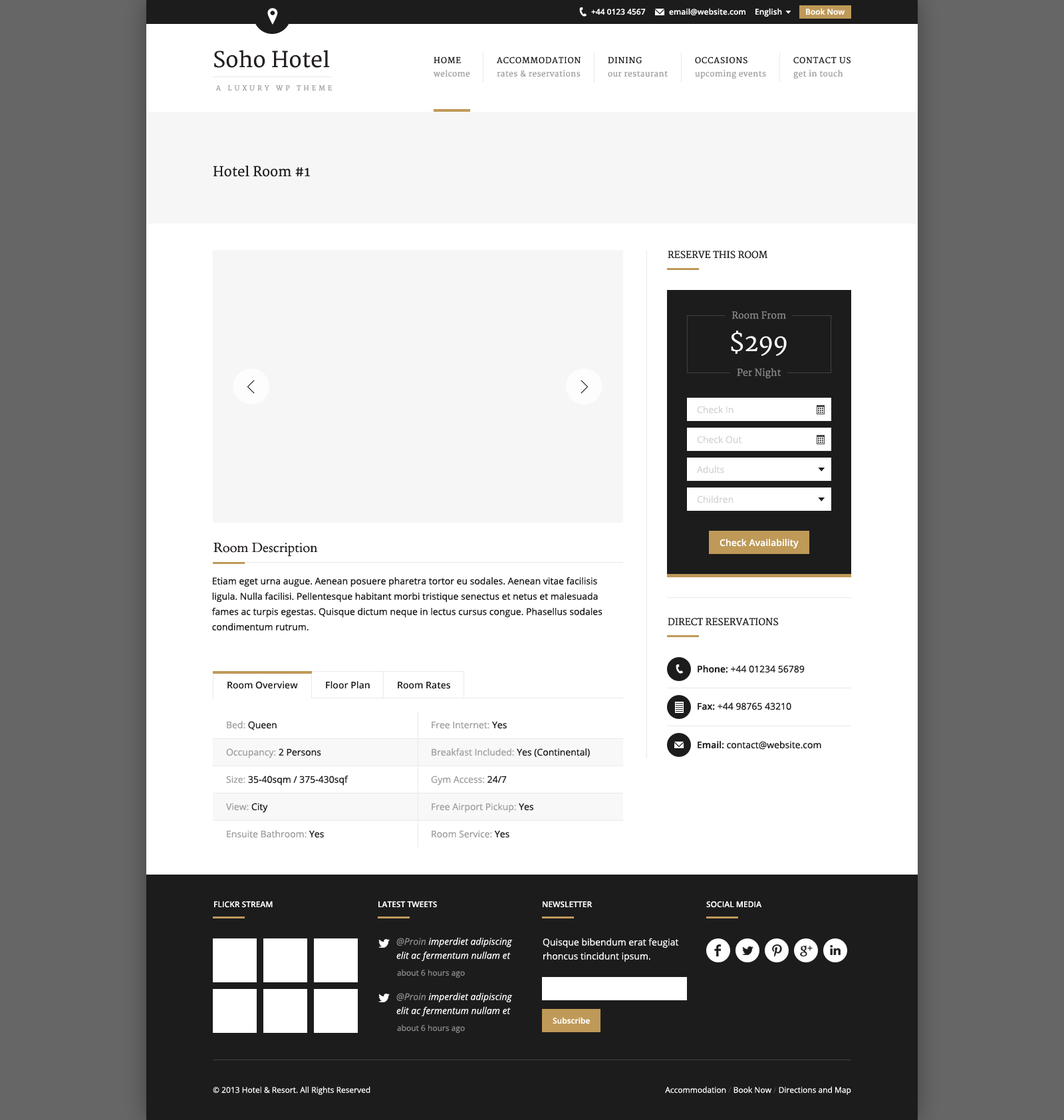
<style>
.page{position:relative;width:1064px;height:1120px;background:#ffffff}
.page>*{position:absolute;margin:0}
.t1{font:8px "OpenSans-Semibold";color:#ffffff}
.t2{font:21.3px "Merriweather";color:#231f20}
.t3{font:8px "Merriweather";letter-spacing:0.075em;color:#1c1c1c;text-transform:uppercase}
.t4{font:8px "Merriweather";letter-spacing:0.025em;color:#a09d9d}
.t5{font:6.7px "Merriweather";letter-spacing:0.4em;color:#a09d9d;text-transform:uppercase}
.t6{font:13.3px "Merriweather";color:#1c1c1c}
.t7{font:9.3px "Merriweather";color:#231f20;text-transform:uppercase}
.t8{font:9.3px "Merriweather";color:#8b8b8b}
.t9{font:23.9px "Merriweather";color:#ffffff}
.t10{font:9.3px "OpenSans";color:#d3d3d3}
.t11{font:13.3px "Cardo-Regular";color:#231f20}
.t12{font:9.3px "OpenSans-Semibold";color:#ffffff}
.t13{font:9.3px/15.3px "OpenSans";color:#1c1c1c}
.t14{font:9.3px "OpenSans";color:#1c1c1c}
.t15{font:9.3px "OpenSans-Semibold";color:#1c1c1c}
.t16{font:9.3px "OpenSans";color:#a09d9d}
.t17{font:8px "OpenSans-Semibold";color:#ffffff;text-transform:uppercase}
.t18{font:9.3px/14px "OpenSans-Italic";color:#ffffff}
.t19{font:9.3px/14px "OpenSans-Italic";color:#8b8b8b}
.t20{font:9.3px/14px "OpenSans";color:#ffffff}
.t21{font:8px "OpenSans";color:#8b8b8b}
.t22{font:8px "OpenSans";color:#ffffff}
.t23{font:8px "OpenSans";color:#424242}
</style>
<div class="page">
<p class="t1" style="left:591px;top:9px;width:55px;height:6px">+44 0123 4567</p>
<p class="t1" style="left:669px;top:8px;width:77px;height:7px">email@website.com</p>
<p class="t1" style="left:756px;top:8px;width:26px;height:9px">English</p>
<p class="t1" style="left:806px;top:8px;width:39px;height:7px">Book Now</p>
<p class="t2" style="left:214px;top:50px;width:116px;height:18px">Soho Hotel</p>
<p class="t3" style="left:434px;top:57px;width:27px;height:7px">Home</p>
<p class="t3" style="left:497px;top:57px;width:84px;height:7px">Accommodation</p>
<p class="t3" style="left:608px;top:57px;width:34px;height:7px">Dining</p>
<p class="t3" style="left:695px;top:57px;width:53px;height:7px">Occasions</p>
<p class="t3" style="left:794px;top:57px;width:57px;height:7px">Contact Us</p>
<p class="t4" style="left:434px;top:70px;width:36px;height:7px">welcome</p>
<p class="t4" style="left:497px;top:70px;width:84px;height:7px">rates &amp; reservations</p>
<p class="t4" style="left:608px;top:71px;width:60px;height:6px">our restaurant</p>
<p class="t4" style="left:695px;top:70px;width:71px;height:9px">upcoming events</p>
<p class="t4" style="left:794px;top:70px;width:50px;height:9px">get in touch</p>
<p class="t5" style="left:216px;top:85px;width:116px;height:6px">A Luxury WP Theme</p>
<p class="t6" style="left:214px;top:166px;width:96px;height:11px">Hotel Room #1</p>
<p class="t7" style="left:668px;top:251px;width:100px;height:8px">Reserve This Room</p>
<p class="t8" style="left:732px;top:311px;width:54px;height:8px">Room From</p>
<p class="t9" style="left:731px;top:331px;width:56px;height:25px">$299</p>
<p class="t8" style="left:737px;top:368px;width:45px;height:11px">Per Night</p>
<p class="t10" style="left:697px;top:406px;width:37px;height:8px">Check In</p>
<p class="t10" style="left:697px;top:436px;width:45px;height:8px">Check Out</p>
<p class="t10" style="left:697px;top:466px;width:27px;height:8px">Adults</p>
<p class="t10" style="left:697px;top:496px;width:37px;height:8px">Children</p>
<p class="t11" style="left:214px;top:543px;width:104px;height:14px">Room Description</p>
<p class="t12" style="left:720px;top:539px;width:79px;height:10px">Check Availability</p>
<p class="t13" style="left:212px;top:577px;width:391px;height:54px">Etiam eget urna augue. Aenean posuere pharetra tortor eu sodales. Aenean vitae facilisis ligula. Nulla facilisi. Pellentesque habitant morbi tristique senectus et netus et malesuada fames ac turpis egestas. Quisque dictum neque in lectus cursus congue. Phasellus sodales condimentum rutrum.</p>
<p class="t7" style="left:668px;top:618px;width:111px;height:8px">Direct Reservations</p>
<p class="t14" style="left:698px;top:665px;width:107px;height:8px"><span class="t15">Phone:</span> +44 01234 56789</p>
<p class="t15" style="left:228px;top:681px;width:70px;height:8px">Room Overview</p>
<p class="t15" style="left:326px;top:681px;width:44px;height:8px">Floor Plan</p>
<p class="t15" style="left:398px;top:682px;width:52px;height:7px">Room Rates</p>
<p class="t14" style="left:698px;top:703px;width:94px;height:7px"><span class="t15">Fax: </span>+44 98765 43210</p>
<p class="t14" style="left:227px;top:721px;width:50px;height:9px"><span class="t16">Bed: </span>Queen</p>
<p class="t16" style="left:432px;top:722px;width:75px;height:7px">Free Internet: <span class="t14">Yes</span></p>
<p class="t16" style="left:226px;top:748px;width:95px;height:10px">Occupancy: <span class="t14">2 Persons</span></p>
<p class="t16" style="left:432px;top:748px;width:158px;height:10px">Breakfast Included: <span class="t14">Yes (Continental)</span></p>
<p class="t14" style="left:698px;top:741px;width:124px;height:9px"><span class="t15">Email: </span>contact@website.com</p>
<p class="t14" style="left:226px;top:776px;width:123px;height:10px"><span class="t16">Size: </span>35-40sqm / 375-430sqf</p>
<p class="t16" style="left:431px;top:776px;width:76px;height:10px">Gym Access: <span class="t14">24/7</span></p>
<p class="t16" style="left:226px;top:803px;width:42px;height:10px">View: <span class="t14">City</span></p>
<p class="t16" style="left:432px;top:803px;width:102px;height:10px">Free Airport Pickup: <span class="t14">Yes</span></p>
<p class="t16" style="left:227px;top:830px;width:97px;height:8px">Ensuite Bathroom: <span class="t14">Yes</span></p>
<p class="t16" style="left:432px;top:830px;width:78px;height:8px">Room Service: <span class="t14">Yes</span></p>
<p class="t17" style="left:214px;top:901px;width:59px;height:7px">Flickr Stream</p>
<p class="t17" style="left:379px;top:901px;width:58px;height:7px">Latest Tweets</p>
<p class="t17" style="left:543px;top:901px;width:50px;height:7px">Newsletter</p>
<p class="t17" style="left:706px;top:901px;width:56px;height:7px">Social Media</p>
<p class="t18" style="left:396px;top:937px;width:117px;height:24px"><span class="t19">@Proin </span>imperdiet adipiscing elit ac fermentum nullam et</p>
<p class="t20" style="left:543px;top:938px;width:136px;height:24px">Quisque bibendum erat feugiat rhoncus tincidunt ipsum.</p>
<p class="t21" style="left:397px;top:969px;width:68px;height:9px">about 6 hours ago</p>
<p class="t18" style="left:396px;top:993px;width:117px;height:24px"><span class="t19">@Proin</span> imperdiet adipiscing elit ac fermentum nullam et</p>
<p class="t21" style="left:397px;top:1024px;width:68px;height:9px">about 6 hours ago</p>
<p class="t1" style="left:553px;top:1017px;width:37px;height:7px">Subscribe</p>
<p class="t22" style="left:213px;top:1086px;width:158px;height:9px">© 2013 Hotel &amp; Resort. All Rights Reserved</p>
<p class="t22" style="left:665px;top:1086px;width:187px;height:9px">Accommodation <span class="t23">/</span> Book Now <span class="t23">/</span> Directions and Map</p>
</div>
